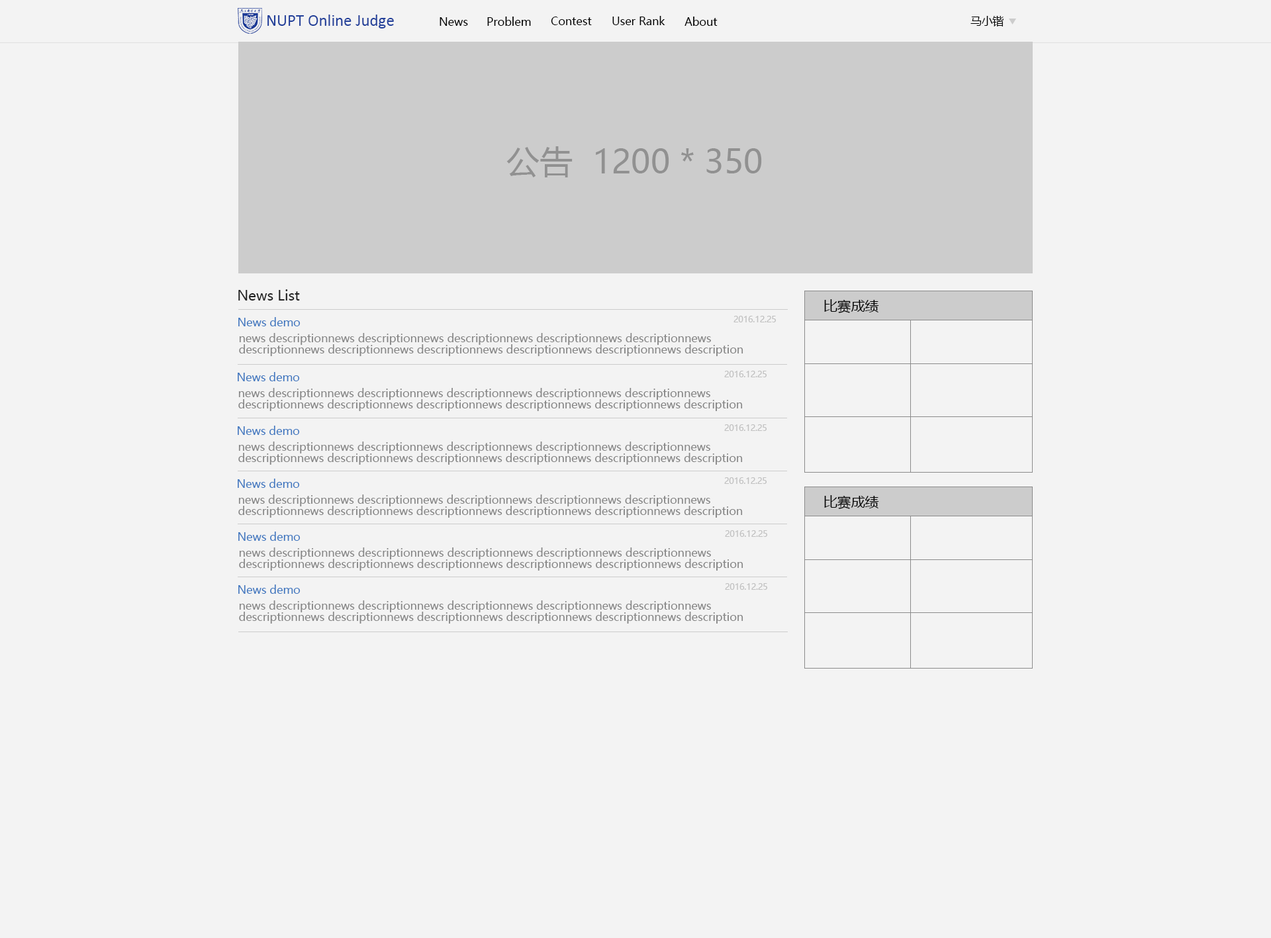
<style>
.page{position:relative;width:1271px;height:938px;background:#f3f3f3}
.page>*{position:absolute;margin:0}
.t1{font:16.6px "Calibri";color:#22409a}
.t2{font:11px "MicrosoftYaHei";color:#000000}
.t3{font:33.1px "MicrosoftYaHei";color:#919191}
.t4{font:30.3px "MicrosoftYaHei";color:#222222}
.t5{font:13.8px "MicrosoftYaHei";color:#222222}
.t6{font:13.8px "MicrosoftYaHei";color:#000000}
.t7{font:11px "MicrosoftYaHei";color:#4078c0}
.t8{font:8.3px "MicrosoftYaHei";color:#c1c1c1}
.t9{font:11px/11px "MicrosoftYaHei";color:#868686}
</style>
<div class="page">
<p class="t1" style="left:267px;top:15px;width:127px;height:13px">NUPT Online Judge</p>
<p class="t2" style="left:440px;top:17px;width:28px;height:9px">News</p>
<p class="t2" style="left:487px;top:17px;width:44px;height:9px">Problem</p>
<p class="t2" style="left:551px;top:17px;width:41px;height:8px">Contest</p>
<p class="t2" style="left:612px;top:16px;width:53px;height:9px">User Rank</p>
<p class="t2" style="left:685px;top:17px;width:33px;height:9px">About</p>
<p class="t2" style="left:971px;top:16px;width:33px;height:10px">马小锴</p>
<p class="t3" style="left:506px;top:146px;width:256px;height:31px"><span class="t4"><br></span>公告  1200 * 350</p>
<p class="t5" style="left:238px;top:289px;width:62px;height:12px">News List</p>
<p class="t6" style="left:824px;top:299px;width:55px;height:14px">比赛成绩</p>
<p class="t7" style="left:238px;top:317px;width:63px;height:9px">News demo</p>
<p class="t8" style="left:734px;top:316px;width:42px;height:6px">2016.12.25</p>
<p class="t9" style="left:239px;top:333px;width:504px;height:23px">news descriptionnews descriptionnews descriptionnews descriptionnews descriptionnews descriptionnews descriptionnews descriptionnews descriptionnews descriptionnews description</p>
<p class="t7" style="left:238px;top:372px;width:62px;height:9px">News demo</p>
<p class="t8" style="left:724px;top:371px;width:43px;height:6px">2016.12.25</p>
<p class="t9" style="left:238px;top:388px;width:505px;height:23px">news descriptionnews descriptionnews descriptionnews descriptionnews descriptionnews descriptionnews descriptionnews descriptionnews descriptionnews descriptionnews description</p>
<p class="t7" style="left:238px;top:426px;width:62px;height:9px">News demo</p>
<p class="t8" style="left:724px;top:424px;width:43px;height:7px">2016.12.25</p>
<p class="t9" style="left:238px;top:442px;width:505px;height:23px">news descriptionnews descriptionnews descriptionnews descriptionnews descriptionnews descriptionnews descriptionnews descriptionnews descriptionnews descriptionnews description</p>
<p class="t7" style="left:238px;top:479px;width:62px;height:9px">News demo</p>
<p class="t8" style="left:724px;top:477px;width:43px;height:7px">2016.12.25</p>
<p class="t9" style="left:238px;top:495px;width:505px;height:23px">news descriptionnews descriptionnews descriptionnews descriptionnews descriptionnews descriptionnews descriptionnews descriptionnews descriptionnews descriptionnews description</p>
<p class="t6" style="left:824px;top:495px;width:55px;height:14px">比赛成绩</p>
<p class="t7" style="left:238px;top:532px;width:63px;height:9px">News demo</p>
<p class="t8" style="left:725px;top:530px;width:42px;height:7px">2016.12.25</p>
<p class="t9" style="left:239px;top:548px;width:504px;height:23px">news descriptionnews descriptionnews descriptionnews descriptionnews descriptionnews descriptionnews descriptionnews descriptionnews descriptionnews descriptionnews description</p>
<p class="t7" style="left:238px;top:585px;width:63px;height:9px">News demo</p>
<p class="t8" style="left:725px;top:583px;width:42px;height:7px">2016.12.25</p>
<p class="t9" style="left:239px;top:600px;width:504px;height:24px">news descriptionnews descriptionnews descriptionnews descriptionnews descriptionnews descriptionnews descriptionnews descriptionnews descriptionnews descriptionnews description</p>
</div>
